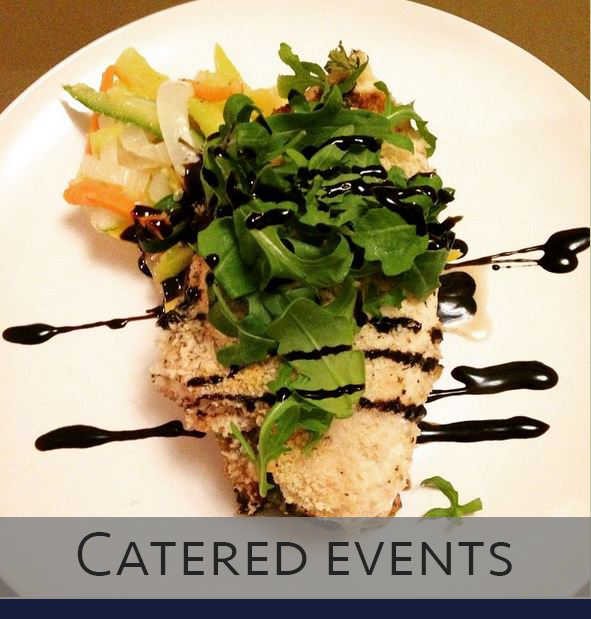
<style>
.page{position:relative;width:591px;height:619px}
.page>*{position:absolute;margin:0}
.t1{font:64px "Seravek-Light";color:#232323;font-variant:small-caps}
</style>
<div class="page">
<p class="t1" style="left:77px;top:532px;width:435px;height:44px">Catered events</p>
</div>
